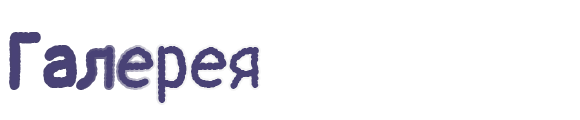
<style>
.page{position:relative;width:580px;height:120px;background:#ffffff}
.page>*{position:absolute;margin:0}
.t1{font:75px "Pangolin-Regular";color:#494276}
</style>
<div class="page">
<p class="t1" style="left:11px;top:34px;width:248px;height:69px">Галерея</p>
</div>
